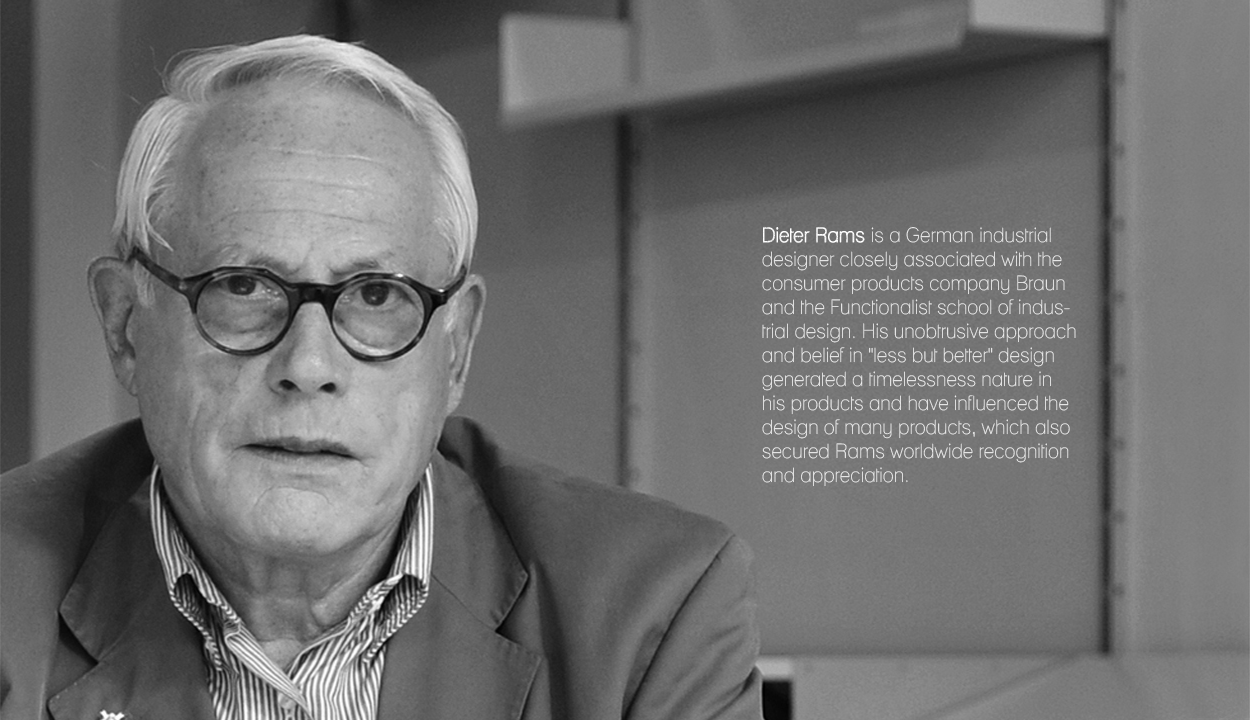
<style>
.page{position:relative;width:1250px;height:720px}
.page>*{position:absolute;margin:0}
.t1{font:20px "Lane-Narrow";color:#ededed}
.t2{font:20px "Lane-Cane";color:#ffffff}
</style>
<div class="page">
<p class="t1" style="left:762px;top:227px;width:314px;height:260px"><span class="t2">Dieter Rams </span>is a German industrial designer closely associated with the consumer products company Braun and the Functionalist school of industrial design. His unobtrusive approach and belief in "less but better" design generated a timelessness nature in his products and have influenced the design of many products, which also secured Rams worldwide recognition and appreciation.</p>
</div>
